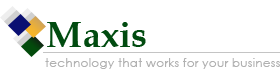
<style>
.page{position:relative;width:280px;height:76px;background:#ffffff}
.page>*{position:absolute;margin:0}
.t1{font:36.2px "BookAntiqua-Bold";color:#014b10}
.t2{font:12.4px "CenturyGothic";color:#b1b1b1}
</style>
<div class="page">
<p class="t1" style="left:47px;top:22px;width:99px;height:25px">Maxis</p>
<p class="t2" style="left:45px;top:58px;width:235px;height:11px">technology that works for your business</p>
</div>
